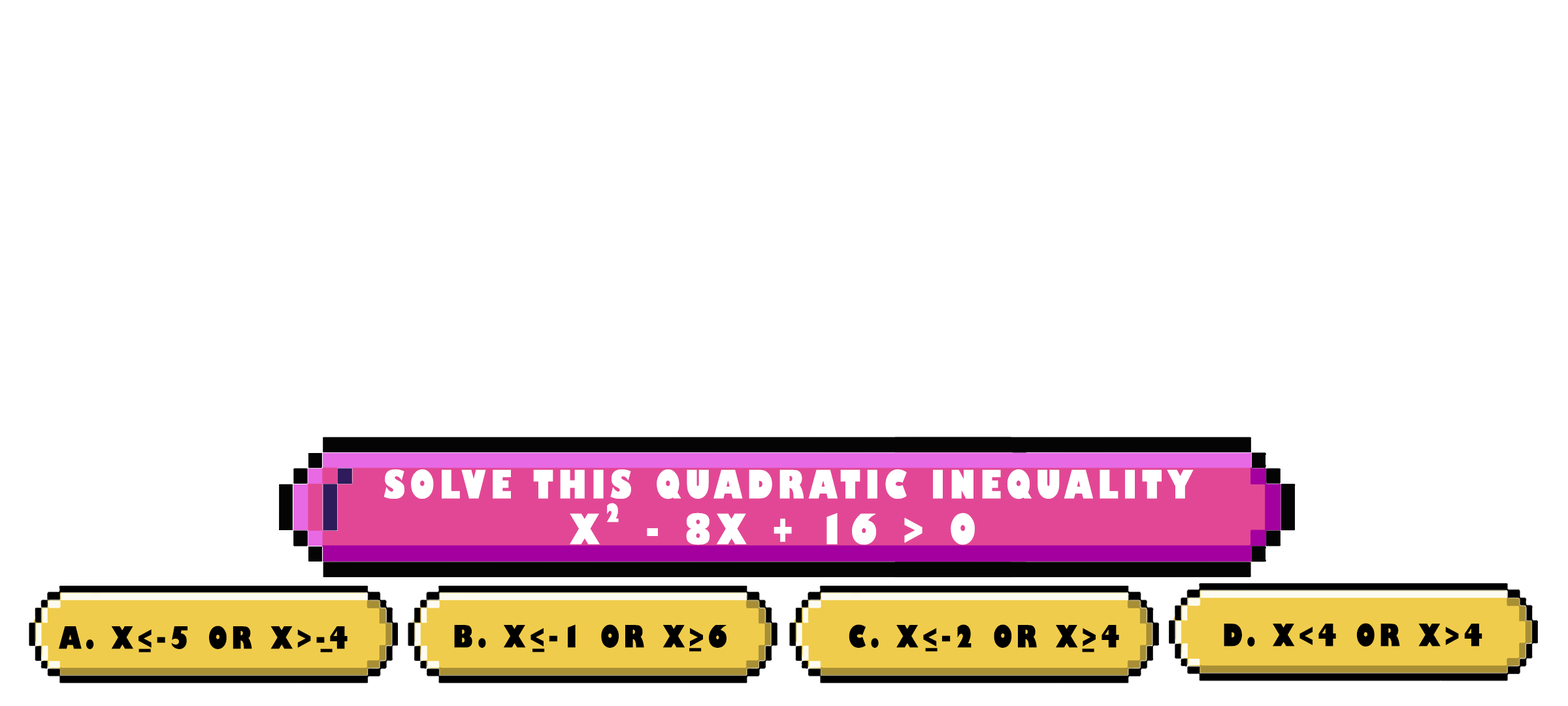
<style>
.page{position:relative;width:1568px;height:706px;background:#ffffff}
.page>*{position:absolute;margin:0}
.t1{font:38.1px "GillSans-UltraBoldCondensed";letter-spacing:0.115em;color:#ffffff;text-transform:uppercase;scale:1.12 1}
.t2{font:24.5px "GillSans-UltraBoldCondensed";letter-spacing:0.115em;color:#ffffff;text-transform:uppercase;scale:1.12 1}
.t3{font:40.8px "GillSans-UltraBoldCondensed";letter-spacing:0.115em;color:#ffffff;text-transform:uppercase;scale:1.12 1}
.t4{font:29.9px "GillSans-UltraBoldCondensed";letter-spacing:0.115em;color:#000000;text-transform:uppercase;scale:1.12 1}
</style>
<div class="page">
<p class="t1" style="left:384px;top:469px;width:810px;height:30px">solve this quadratic inequality</p>
<p class="t2" style="left:607px;top:502px;width:12px;height:20px">2</p>
<p class="t3" style="left:570px;top:512px;width:405px;height:33px">x  - 8x + 16 &gt; 0</p>
<p class="t4" style="left:59px;top:625px;width:289px;height:24px">a. x&lt;-5 or x&gt;-4</p>
<p class="t4" style="left:454px;top:624px;width:273px;height:23px">b. x&lt;-1 or x&gt;6</p>
<p class="t4" style="left:849px;top:624px;width:270px;height:23px">c. x&lt;-2 or x&gt;4</p>
<p class="t4" style="left:1224px;top:623px;width:258px;height:23px">d. x&lt;4 or x&gt;4</p>
<p class="t4" style="left:139px;top:648px;width:12px;height:4px">_</p>
<p class="t4" style="left:320px;top:648px;width:13px;height:4px">_</p>
<p class="t4" style="left:532px;top:648px;width:13px;height:4px">_</p>
<p class="t4" style="left:689px;top:647px;width:13px;height:4px">_</p>
<p class="t4" style="left:925px;top:647px;width:13px;height:4px">_</p>
<p class="t4" style="left:1082px;top:648px;width:12px;height:4px">_</p>
</div>
